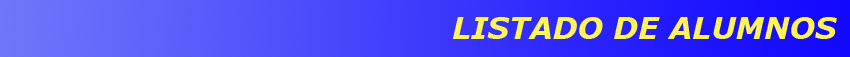
<style>
.page{position:relative;width:850px;height:57px}
.page>*{position:absolute;margin:0}
.t1{font:30px "Verdana-BoldItalic";color:#fff557}
</style>
<div class="page">
<p class="t1" style="left:453px;top:17px;width:384px;height:22px">LISTADO DE ALUMNOS</p>
</div>
